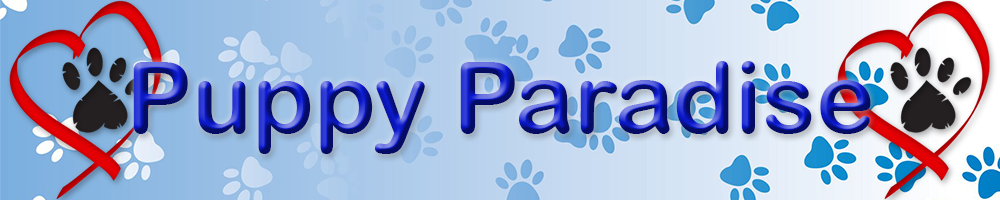
<style>
.page{position:relative;width:1000px;height:200px}
.page>*{position:absolute;margin:0}
.t1{font:99px "ArialRoundedMTBold"}
</style>
<div class="page">
<p class="t1" style="left:133px;top:61px;width:738px;height:93px">Puppy Paradise</p>
</div>
